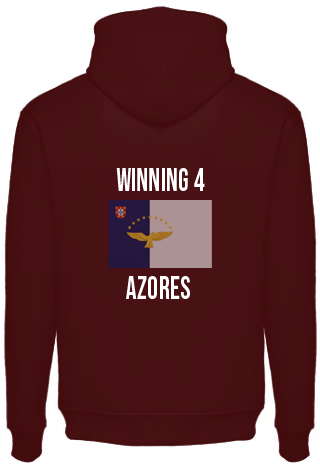
<style>
.page{position:relative;width:320px;height:468px}
.page>*{position:absolute;margin:0}
.t1{font:32px "BebasNeue-Regular";letter-spacing:0.01em;color:#ffffff;scale:0.85 1}
</style>
<div class="page">
<p class="t1" style="left:116px;top:168px;width:89px;height:23px">winning 4</p>
<p class="t1" style="left:126px;top:276px;width:64px;height:23px">AZORES</p>
</div>
